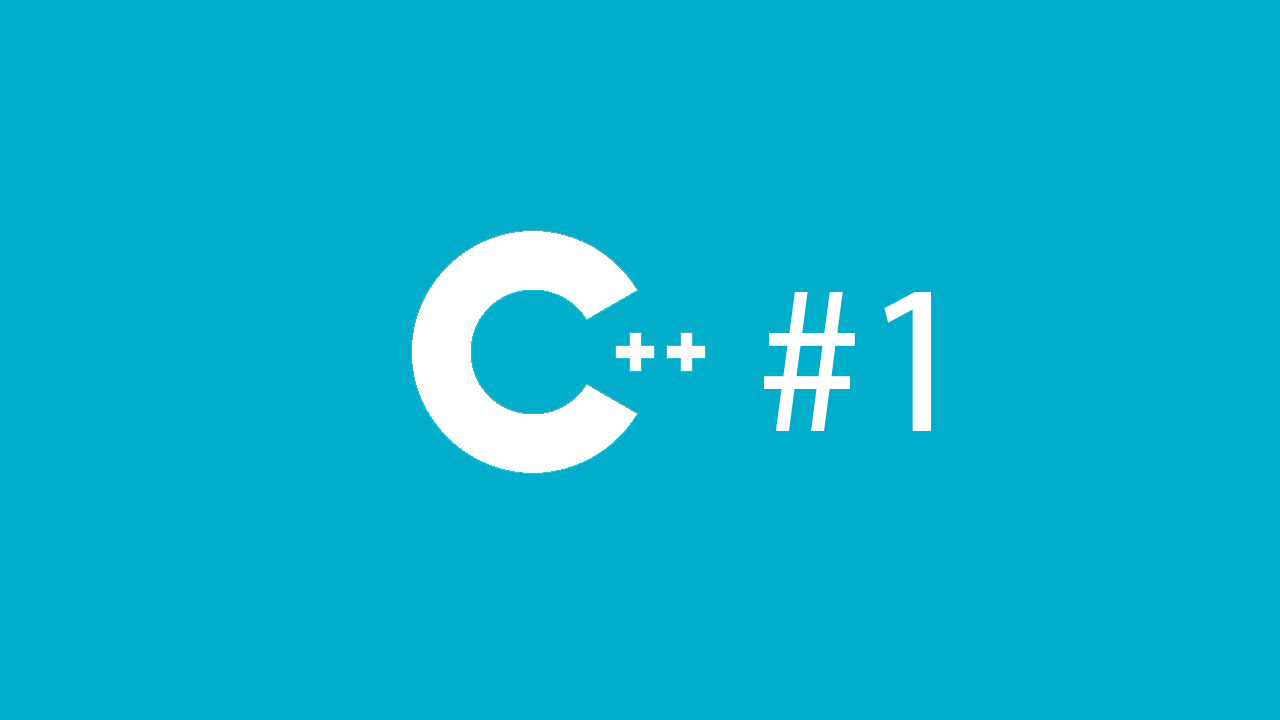
<style>
.page{position:relative;width:1280px;height:720px;background:#00adcb}
.page>*{position:absolute;margin:0}
.t1{font:214px "MyriadPro-Regular";color:#ffffff}
</style>
<div class="page">
<p class="t1" style="left:764px;top:292px;width:167px;height:139px">#1</p>
</div>
